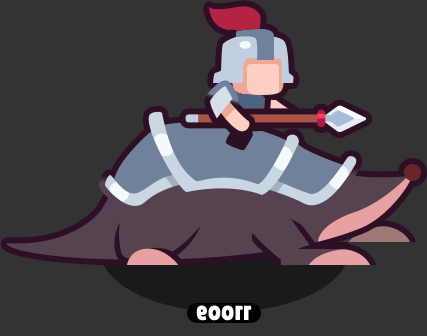
<style>
.page{position:relative;width:427px;height:336px;background:#333333}
.page>*{position:absolute;margin:0}
.t1{font:20px "LilitaOne";color:#ffffff;font-weight:bold}
</style>
<div class="page">
<p class="t1" style="left:196px;top:305px;width:56px;height:16px;rotate:180deg">11009</p>
</div>
